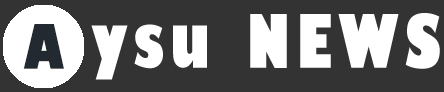
<style>
.page{position:relative;width:444px;height:92px;background:#333333}
.page>*{position:absolute;margin:0}
.t1{font:72px "GillSans-UltraBoldCondensed";letter-spacing:0.09em;color:#ffffff}
.t2{font:60px "GillSans-UltraBoldCondensed";letter-spacing:0.09em;color:#222930}
</style>
<div class="page">
<p class="t1" style="left:91px;top:13px;width:349px;height:67px">ysu NEWS</p>
<p class="t2" style="left:23px;top:24px;width:41px;height:45px">A</p>
</div>
